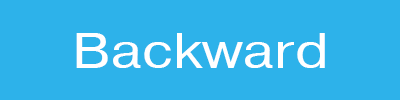
<style>
.page{position:relative;width:400px;height:100px;background:#2db2ea}
.page>*{position:absolute;margin:0}
.t1{font:48px "Helvetica";color:#ffffff;scale:1.2 1}
</style>
<div class="page">
<p class="t1" style="left:76px;top:33px;width:249px;height:35px">Backward</p>
</div>
